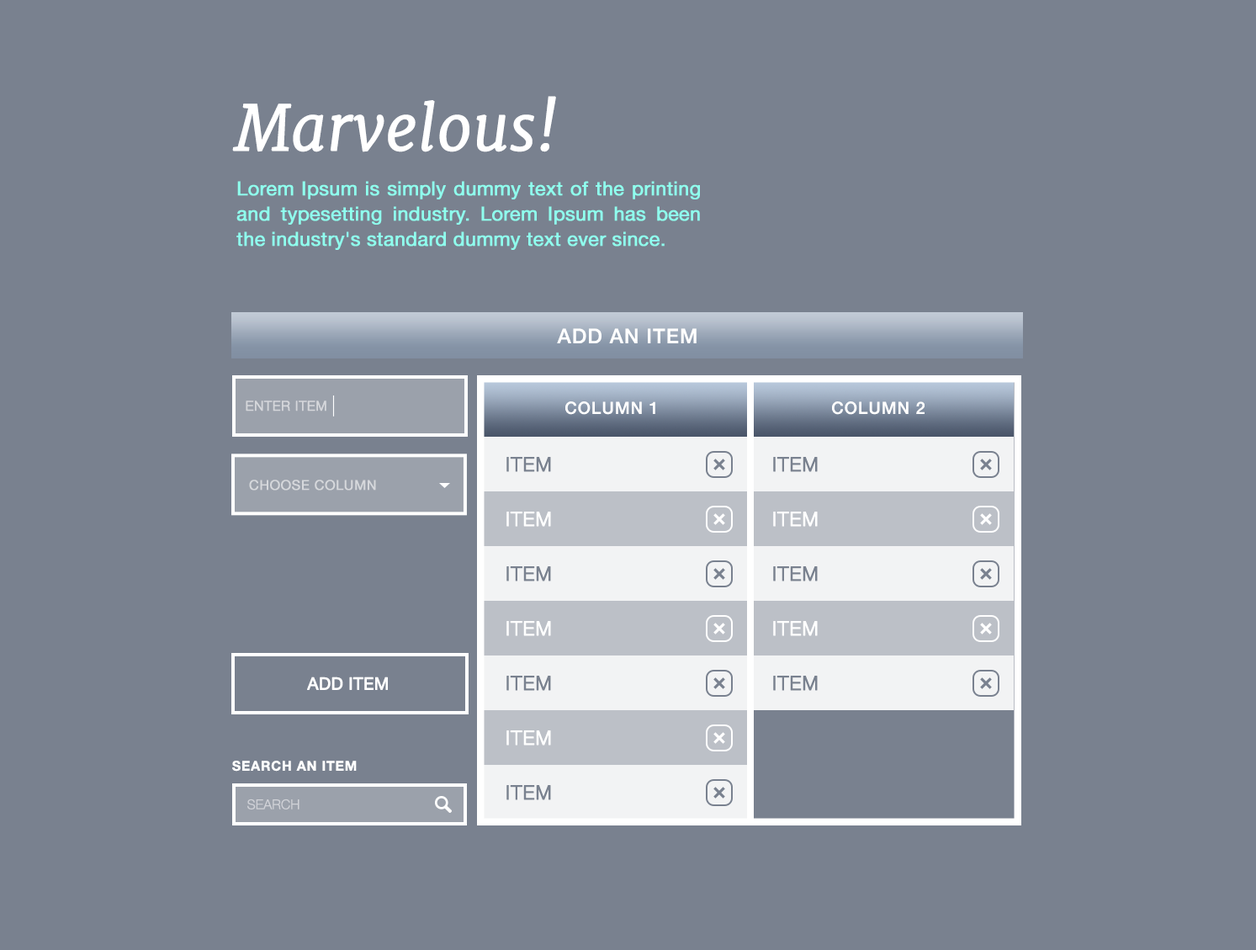
<style>
.page{position:relative;width:1256px;height:950px;background:#79818f}
.page>*{position:absolute;margin:0}
.t1{font:60.9px "Merriweather-LightItalic";color:#ffffff;font-weight:bold}
.t2{font:19.3px/25.2px "HelveticaNeue";color:#8fffee;font-weight:bold}
.t3{font:20.2px "HelveticaNeue-Medium";letter-spacing:0.05em;color:#ffffff;text-transform:uppercase}
.t4{font:13.5px "HelveticaNeue-Light";letter-spacing:0.025em;color:#d5d7db;text-transform:uppercase;font-weight:bold}
.t5{font:16.8px "HelveticaNeue-Medium";letter-spacing:0.05em;color:#ffffff;text-transform:uppercase}
.t6{font:19.6px "HelveticaNeue-Light";letter-spacing:0.025em;color:#79818f;text-transform:uppercase;font-weight:bold}
.t7{font:13.5px "HelveticaNeue";letter-spacing:0.025em;color:#d6d8dc;text-transform:uppercase;font-weight:bold}
.t8{font:19.6px "HelveticaNeue-Light";letter-spacing:0.025em;color:#ffffff;text-transform:uppercase;font-weight:bold}
.t9{font:16.8px "HelveticaNeue";color:#ffffff;text-transform:uppercase;font-weight:bold}
.t10{font:13.5px "HelveticaNeue-Bold";letter-spacing:0.05em;color:#ffffff;text-transform:uppercase}
.t11{font:13.5px "HelveticaNeue-Light";color:#d1d3d8;text-transform:uppercase}
</style>
<div class="page">
<p class="t1" style="left:232px;top:96px;width:324px;height:56px">Marvelous!</p>
<p class="t2" style="left:236px;top:181px;width:464px;height:69px;text-align:justify">Lorem Ipsum is simply dummy text of the printing and typesetting industry. Lorem Ipsum has been the industry's standard dummy text ever since.</p>
<p class="t3" style="left:557px;top:328px;width:139px;height:15px">Add an item</p>
<p class="t4" style="left:246px;top:400px;width:80px;height:11px">Enter Item</p>
<p class="t5" style="left:565px;top:401px;width:90px;height:14px">Column 1</p>
<p class="t5" style="left:832px;top:401px;width:92px;height:14px">Column 2</p>
<p class="t6" style="left:506px;top:457px;width:45px;height:15px">Item</p>
<p class="t6" style="left:773px;top:457px;width:45px;height:15px">Item</p>
<p class="t7" style="left:249px;top:479px;width:127px;height:11px">Choose Column</p>
<p class="t8" style="left:506px;top:511px;width:45px;height:16px">Item</p>
<p class="t8" style="left:773px;top:511px;width:45px;height:16px">Item</p>
<p class="t6" style="left:506px;top:566px;width:45px;height:15px">Item</p>
<p class="t6" style="left:773px;top:566px;width:45px;height:15px">Item</p>
<p class="t8" style="left:506px;top:621px;width:45px;height:15px">Item</p>
<p class="t8" style="left:773px;top:621px;width:45px;height:15px">Item</p>
<p class="t9" style="left:307px;top:676px;width:81px;height:14px">Add Item</p>
<p class="t6" style="left:506px;top:675px;width:45px;height:16px">Item</p>
<p class="t6" style="left:773px;top:675px;width:45px;height:16px">Item</p>
<p class="t8" style="left:506px;top:730px;width:45px;height:15px">Item</p>
<p class="t10" style="left:232px;top:760px;width:125px;height:11px">Search an Item</p>
<p class="t6" style="left:506px;top:785px;width:45px;height:15px">Item</p>
<p class="t11" style="left:247px;top:798px;width:52px;height:11px">Search</p>
</div>
